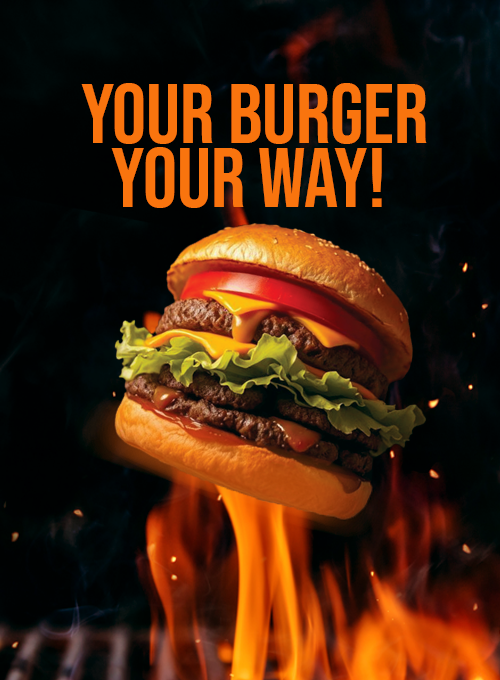
<style>
.page{position:relative;width:500px;height:680px}
.page>*{position:absolute;margin:0}
.t1{font:84.8px/63.6px "BebasNeue-Regular";color:#f87810}
</style>
<div class="page">
<p class="t1" style="left:81px;top:83px;width:346px;height:125px">Your burger<br>  Your way!</p>
</div>
